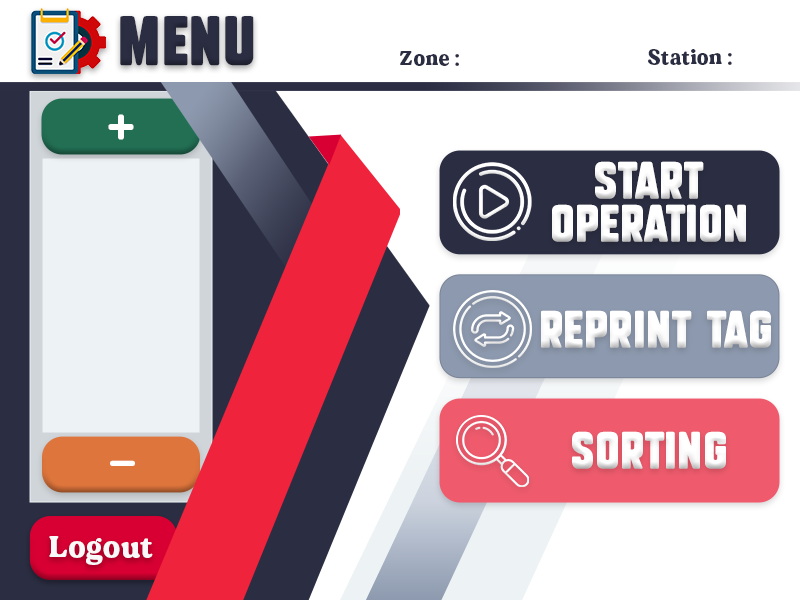
<style>
.page{position:relative;width:800px;height:600px;background:#ffffff}
.page>*{position:absolute;margin:0}
.t1{font:48px "SubtleCurves";letter-spacing:0.025em;color:#2b2d42}
.t2{font:20px "MADEDillan";letter-spacing:0.025em;color:#2b2d42}
.t3{font:60px "MADEDillan";letter-spacing:0.025em;color:#fffffe}
.t4{font:36px "SubtleCurves";letter-spacing:0.025em;color:#ffffff}
.t5{font:30px "MADEDillan";letter-spacing:0.025em;color:#f9f9f9}
</style>
<div class="page">
<p class="t1" style="left:120px;top:16px;width:134px;height:50px">MEnu</p>
<p class="t2" style="left:400px;top:51px;width:59px;height:15px">Zone :</p>
<p class="t2" style="left:648px;top:49px;width:84px;height:16px">Station :</p>
<p class="t3" style="left:108px;top:114px;width:26px;height:26px">+</p>
<p class="t4" style="left:552px;top:161px;width:194px;height:81px;text-align:center">Start<br>Operation</p>
<p class="t4" style="left:541px;top:310px;width:230px;height:38px">Reprint Tag</p>
<p class="t4" style="left:572px;top:431px;width:154px;height:38px">Sorting</p>
<p class="t3" style="left:110px;top:460px;width:25px;height:6px">-</p>
<p class="t5" style="left:49px;top:536px;width:104px;height:29px">Logout</p>
</div>
